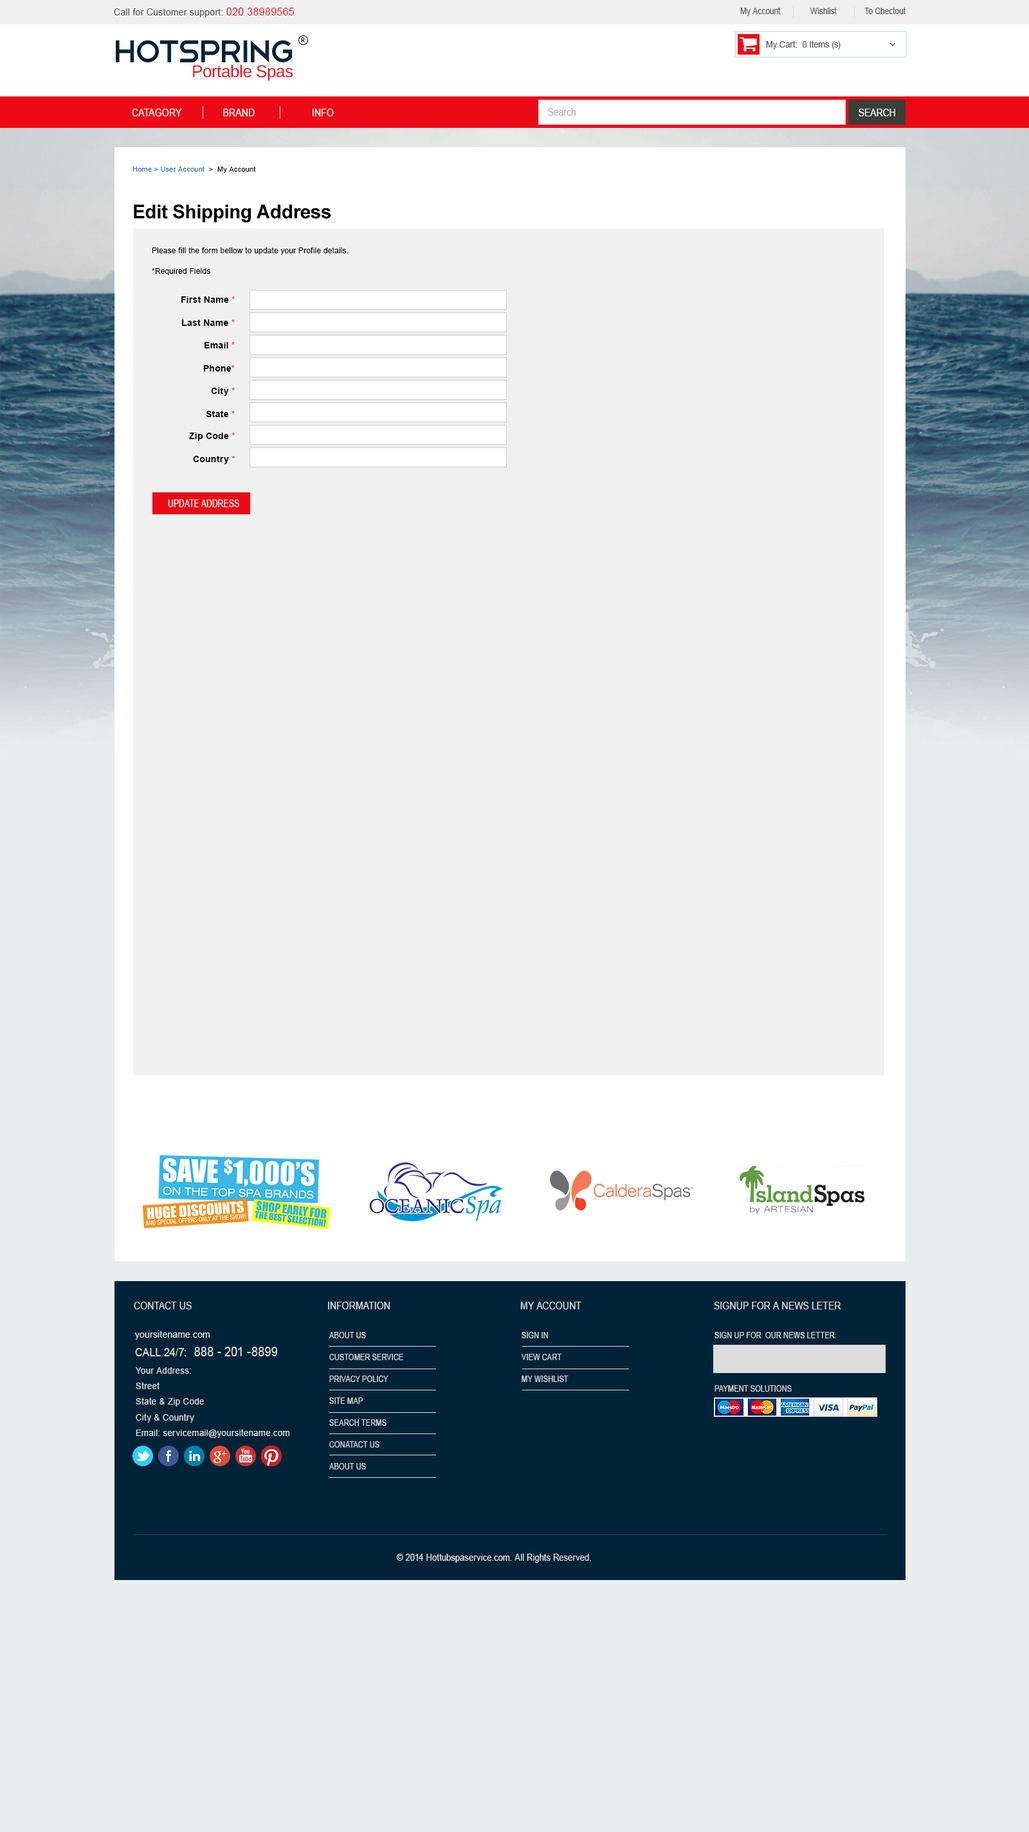
<style>
.page{position:relative;width:1029px;height:1832px;background:#f0f0f0}
.page>*{position:absolute;margin:0}
.t1{font:9.5px "ArialMT";letter-spacing:0.02em;color:#555555;scale:0.95 1}
.t2{font:10.8px "ArialMT";letter-spacing:0.02em;color:#ec0a17;scale:0.95 1}
.t3{font:8.9px "ArialMT";color:#555555;scale:0.87 1}
.t4{font:41.2px "Telegrafico";letter-spacing:-0.08em;color:#012338}
.t5{font:6.8px "HarmoniaSansStd-Regular";letter-spacing:0.03em;color:#012338}
.t6{font:8.8px "ArialMT";color:#555555;scale:0.95 1}
.t7{font:17px "LiberationSans";letter-spacing:-0.02em;color:#ec0a17}
.t8{font:10.3px "ArialMT";letter-spacing:0.01em;color:#ffffff;scale:0.87 1}
.t9{font:10.3px "ArialMT";color:#aeaba9;scale:0.87 1}
.t10{font:10.3px "ArialMT";color:#ffffff;scale:0.87 1}
.t11{font:7.1px "ArialMT";letter-spacing:0.02em;color:#1d70c0}
.t12{font:7.1px "ArialMT";letter-spacing:0.02em;color:#000000}
.t13{font:19.3px "Arial-BoldMT";letter-spacing:-0.02em;color:#000000}
.t14{font:7.7px "ArialMT";letter-spacing:0.02em;color:#000000}
.t15{font:9px "Arial-BoldMT";letter-spacing:0.02em;color:#000000}
.t16{font:9px "Arial-BoldMT";letter-spacing:0.02em;color:#f92834}
.t17{font:10.6px "ArialMT";color:#ffffff;text-transform:uppercase;scale:0.75 1}
.t18{font:10.3px "ArialMT";letter-spacing:0.01em;color:#dddddd;scale:0.87 1}
.t19{font:9.8px "ArialMT";letter-spacing:0.03em;color:#dddddd;scale:0.9 1}
.t20{font:8.1px/21.9px "ArialMT";letter-spacing:0.01em;color:#dddddd;scale:0.87 1}
.t21{font:8.1px "ArialMT";letter-spacing:0.01em;color:#dddddd;scale:0.87 1}
.t22{font:13.3px "ArialMT";letter-spacing:0.01em;color:#dddddd;scale:0.87 1}
.t23{font:11.8px "ArialMT";letter-spacing:0.01em;color:#dddddd;scale:0.87 1}
.t24{font:9.1px/15.5px "ArialMT";letter-spacing:0.03em;color:#dddddd;scale:0.94 1}
.t25{font:9.6px "ArialMT";letter-spacing:0.01em;color:#dddddd;scale:0.87 1}
</style>
<div class="page">
<p class="t1" style="left:114px;top:8px;width:180px;height:9px">Call for Customer support: <span class="t2">020 38989565</span></p>
<p class="t3" style="left:740px;top:7px;width:165px;height:9px">My Account              Wishlist             To Chectout</p>
<p class="t4" style="left:116px;top:40px;width:176px;height:22px">HotSpring</p>
<p class="t5" style="left:301px;top:37px;width:4px;height:5px">R</p>
<p class="t6" style="left:766px;top:40px;width:74px;height:10px">My Cart:  0 Items (s)</p>
<p class="t7" style="left:193px;top:64px;width:100px;height:17px">Portable Spas</p>
<p class="t8" style="left:132px;top:109px;width:202px;height:7px">CATAGORY                BRAND                      INFO</p>
<p class="t9" style="left:548px;top:108px;width:27px;height:8px">Search</p>
<p class="t10" style="left:858px;top:109px;width:37px;height:7px">SEARCH</p>
<p class="t11" style="left:132px;top:166px;width:124px;height:7px">Home &gt; User Account <span class="t12"> &gt;  My Account</span></p>
<p class="t13" style="left:134px;top:204px;width:197px;height:18px">Edit Shipping Address</p>
<p class="t14" style="left:152px;top:248px;width:196px;height:7px">Please fill the form bellow to update your Profile details.</p>
<p class="t14" style="left:152px;top:268px;width:58px;height:7px">*Required Fields</p>
<p class="t15" style="left:181px;top:296px;width:54px;height:7px">First Name <span class="t16">*</span></p>
<p class="t15" style="left:182px;top:320px;width:53px;height:6px">Last Name <span class="t16">*</span></p>
<p class="t15" style="left:204px;top:342px;width:31px;height:6px">Email <span class="t16">*</span></p>
<p class="t15" style="left:203px;top:365px;width:32px;height:7px">Phone<span class="t16">*</span></p>
<p class="t15" style="left:211px;top:388px;width:24px;height:8px">City <span class="t16">*</span></p>
<p class="t15" style="left:206px;top:411px;width:29px;height:6px">State <span class="t16">*</span></p>
<p class="t15" style="left:189px;top:433px;width:46px;height:8px">Zip Code <span class="t16">*</span></p>
<p class="t15" style="left:193px;top:456px;width:42px;height:8px">Country <span class="t16">*</span></p>
<p class="t17" style="left:168px;top:500px;width:71px;height:7px">update Address</p>
<p class="t18" style="left:134px;top:1302px;width:58px;height:8px">CONTACT US</p>
<p class="t18" style="left:328px;top:1302px;width:62px;height:8px">INFORMATION</p>
<p class="t18" style="left:520px;top:1302px;width:61px;height:8px">MY ACCOUNT</p>
<p class="t18" style="left:714px;top:1302px;width:127px;height:8px">SIGNUP FOR A NEWS LETER</p>
<p class="t19" style="left:134px;top:1331px;width:76px;height:9px">yoursitename.com</p>
<p class="t20" style="left:329px;top:1332px;width:74px;height:138px;text-align:justify">ABOUT US<br>CUSTOMER SERVICE<br>PRIVACY POLICY <br>SITE MAP<br>SEARCH TERMS<br>CONATACT US<br>ABOUT US</p>
<p class="t20" style="left:521px;top:1332px;width:47px;height:50px;text-align:justify">SIGN IN<br>VIEW CART<br>MY WISHLIST</p>
<p class="t21" style="left:714px;top:1332px;width:122px;height:6px">SIGN UP FOR  OUR NEWS LETTER:</p>
<p class="t22" style="left:135px;top:1347px;width:142px;height:9px"><span class="t23">CALL 24/7:  </span>888 - 201 -8899</p>
<p class="t24" style="left:136px;top:1367px;width:153px;height:71px;text-align:justify">Your Address:<br>Street<br>State &amp; Zip Code<br>City &amp; Country <br>Email: servicemail@yoursitename.com</p>
<p class="t21" style="left:714px;top:1385px;width:77px;height:7px">PAYMENT SOLUTIONS</p>
<p class="t25" style="left:396px;top:1554px;width:195px;height:9px">© 2014 Hottubspaservice.com. All Rights Reserved.</p>
</div>
